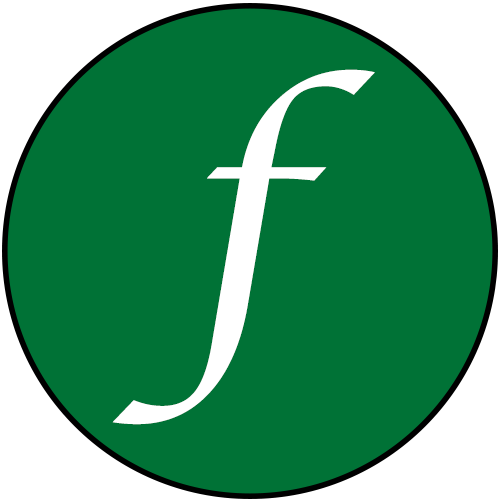
<style>
.page{position:relative;width:500px;height:500px;background:#007236}
.page>*{position:absolute;margin:0}
.t1{font:300px "LucidaCalligraphy-Italic";color:#ffffff}
</style>
<div class="page">
<p class="t1" style="left:112px;top:69px;width:263px;height:356px">f</p>
</div>
